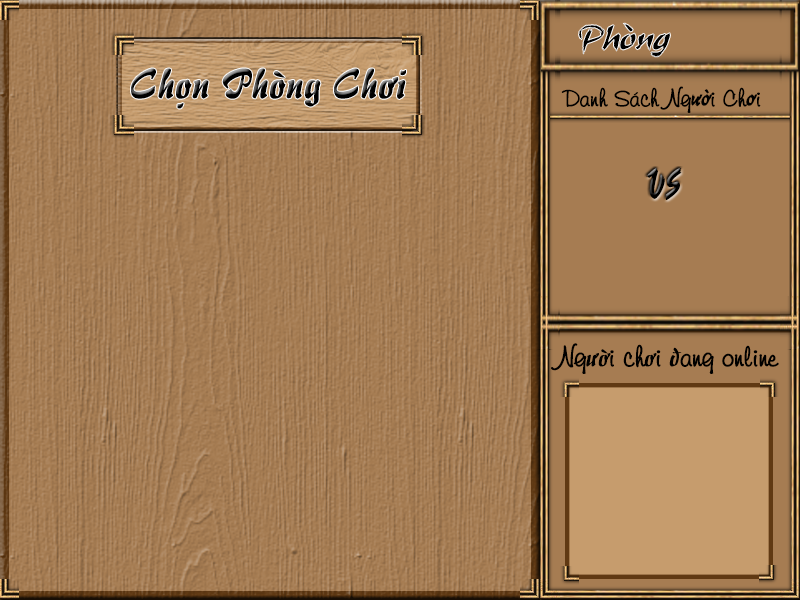
<style>
.page{position:relative;width:800px;height:600px}
.page>*{position:absolute;margin:0}
.t1{font:36px "UVNButLong1";color:#000000}
.t2{font:45px "UVNBuiDoi"}
.t3{font:24px "VNI-Diudang";color:#000000}
.t4{font:24px "UVNButLong2";color:#000000}
.t5{font:36px "UVNButLong2"}
.t6{font:28px "VNI-Diudang";color:#000000}
.t7{font:28px "UVNBuiDoi";color:#000000}
</style>
<div class="page">
<p class="t1" style="left:579px;top:23px;width:91px;height:34px">Phòng</p>
<p class="t2" style="left:131px;top:68px;width:275px;height:41px">Chọn Phòng Chơi</p>
<p class="t3" style="left:561px;top:86px;width:200px;height:27px">Danh Saùch Ng<span class="t4">ườ</span>i Ch<span class="t4">ơ</span>i</p>
<p class="t5" style="left:646px;top:168px;width:36px;height:32px">VS</p>
<p class="t6" style="left:551px;top:343px;width:228px;height:31px">Ng<span class="t7">ườ</span>i ch<span class="t7">ơ</span>i <span class="t7">đ</span>ang online</p>
</div>
